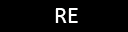
<style>
.page{position:relative;width:128px;height:32px;background:#000000}
.page>*{position:absolute;margin:0}
.t1{font:24px "Calibri";color:#feffff}
</style>
<div class="page">
<p class="t1" style="left:55px;top:8px;width:23px;height:15px">RE</p>
</div>
